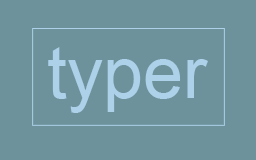
<style>
.page{position:relative;width:256px;height:160px;background:#6d929b}
.page>*{position:absolute;margin:0}
.t1{font:72px "ArialMT";color:#acd1e9}
</style>
<div class="page">
<p class="t1" style="left:48px;top:47px;width:160px;height:66px">typer</p>
</div>
